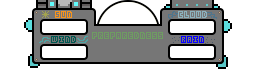
<style>
.page{position:relative;width:256px;height:80px;background:#ffffff}
.page>*{position:absolute;margin:0}
.t1{font:8px "KenPixel-Blocks";color:#f7941d}
.t2{font:8px "KenPixel-Blocks";color:#8cb2be}
.t3{font:8px "KenPixel-Blocks";color:#005952}
.t4{font:8px "KenPixel-Blocks";color:#6e9c62}
.t5{font:8px "KenPixel-Blocks";color:#0600ff}
</style>
<div class="page">
<p class="t1" style="left:55px;top:11px;width:17px;height:7px">SUN</p>
<p class="t2" style="left:178px;top:11px;width:29px;height:7px">CLOUD</p>
<p class="t3" style="left:51px;top:36px;width:25px;height:7px">WIND</p>
<p class="t4" style="left:92px;top:32px;width:71px;height:7px">Preparedness</p>
<p class="t5" style="left:181px;top:36px;width:23px;height:7px">RAIN</p>
</div>
